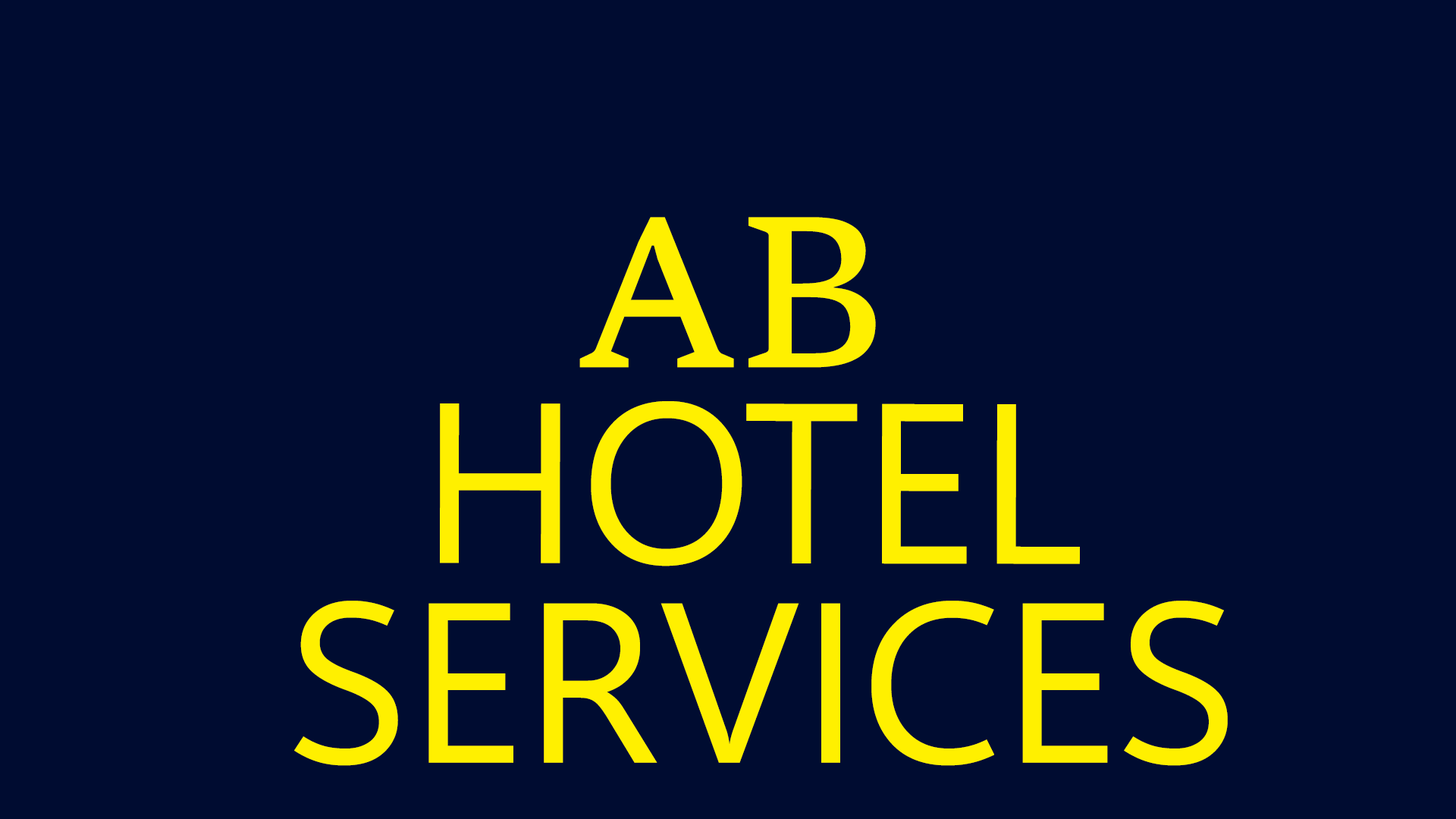
<style>
.page{position:relative;width:1456px;height:819px;background:#000c31}
.page>*{position:absolute;margin:0}
.t1{font:227.5px "Sitka-Small";color:#fff000}
.t2{font:227.5px "SegoeUIVariable";color:#fff000}
</style>
<div class="page">
<p class="t1" style="left:579px;top:217px;width:297px;height:151px">AB</p>
<p class="t2" style="left:440px;top:401px;width:640px;height:165px">HOTEL</p>
<p class="t2" style="left:294px;top:601px;width:934px;height:165px">SERVICES</p>
</div>
